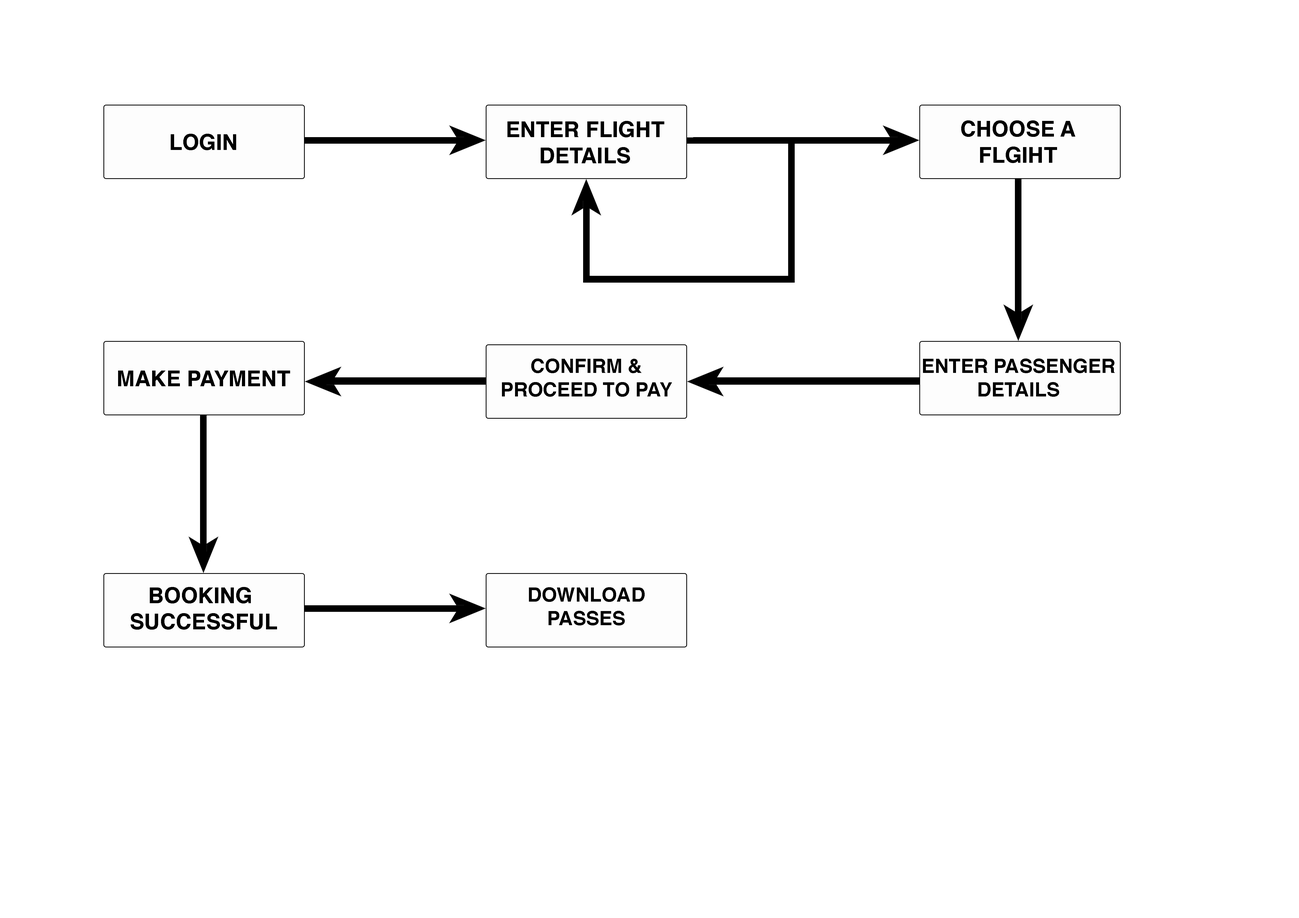
<style>
.page{position:relative;width:1299px;height:918px;background:#ffffff}
.page>*{position:absolute;margin:0}
.t1{font:21.8px "Helvetica-Bold";color:#000000;text-transform:uppercase}
.t2{font:19.6px "Helvetica-Bold";color:#000000;text-transform:uppercase}
</style>
<div class="page">
<p class="t1" style="left:507px;top:121px;width:157px;height:43px;text-align:center">EntEr flight<br>details</p>
<p class="t1" style="left:961px;top:120px;width:114px;height:43px;text-align:center">Choose a<br>flgiht</p>
<p class="t1" style="left:171px;top:134px;width:65px;height:16px">Login</p>
<p class="t2" style="left:502px;top:359px;width:170px;height:38px;text-align:center">Confirm &amp;<br>Proceed to pay</p>
<p class="t2" style="left:923px;top:359px;width:191px;height:38px;text-align:center">Enter Passenger<br>Details</p>
<p class="t1" style="left:118px;top:371px;width:172px;height:15px">MAKE PAYment</p>
<p class="t1" style="left:131px;top:587px;width:146px;height:43px;text-align:center">Booking <br>successful</p>
<p class="t2" style="left:529px;top:587px;width:115px;height:39px;text-align:center">DOWNLOAD<br>PASSES</p>
</div>
